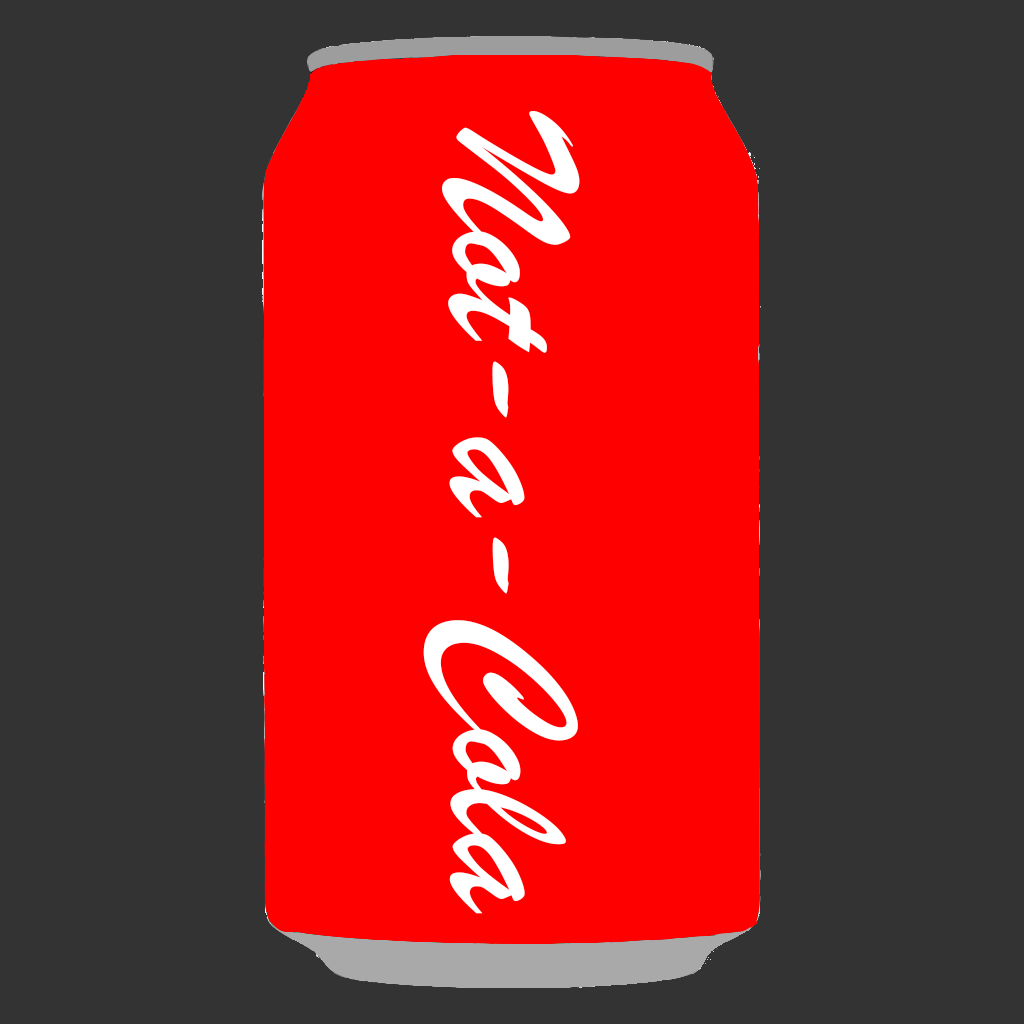
<style>
.page{position:relative;width:1024px;height:1024px;background:#333333}
.page>*{position:absolute;margin:0}
.t1{font:192px "BrushScriptMT";color:#ffffff}
</style>
<div class="page">
<p class="t1" style="left:423px;top:111px;width:157px;height:803px;rotate:90deg">Not-a-Cola</p>
</div>
